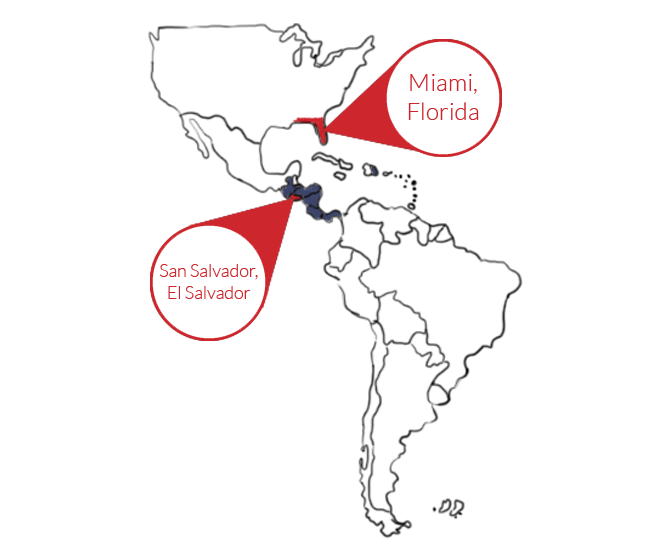
<style>
.page{position:relative;width:659px;height:550px;background:#ffffff}
.page>*{position:absolute;margin:0}
.t1{font:24.4px "Lato-Light";color:#cd262d}
.t2{font:17.9px "Lato-Light";color:#cd262d}
</style>
<div class="page">
<p class="t1" style="left:408px;top:74px;width:71px;height:46px;text-align:center">Miami,<br>Florida</p>
<p class="t2" style="left:159px;top:264px;width:99px;height:35px;text-align:center">San Salvador,<br>El Salvador</p>
</div>
